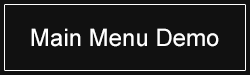
<style>
.page{position:relative;width:250px;height:75px;background:#111111}
.page>*{position:absolute;margin:0}
.t1{font:24px "ArialMT";color:#ffffff}
</style>
<div class="page">
<p class="t1" style="left:31px;top:28px;width:188px;height:19px">Main Menu Demo</p>
</div>
